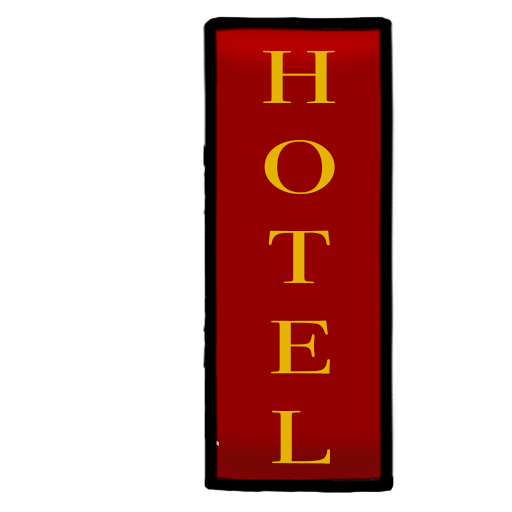
<style>
.page{position:relative;width:512px;height:512px;background:#ffffff}
.page>*{position:absolute;margin:0}
.t1{font:75px "BodoniSvtyTwoSCITCTT-Book";color:#e5b304;scale:1.46 1}
</style>
<div class="page">
<p class="t1" style="left:263px;top:50px;width:73px;height:414px;text-align:center">H<br>O<br>T<br>E<br> L</p>
</div>
